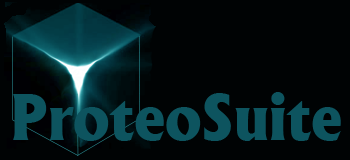
<style>
.page{position:relative;width:350px;height:160px;background:#000304}
.page>*{position:absolute;margin:0}
.t1{font:60px "Albertus-ExtraBold";color:#0d545f}
</style>
<div class="page">
<p class="t1" style="left:13px;top:92px;width:328px;height:49px">ProteoSuite</p>
</div>
